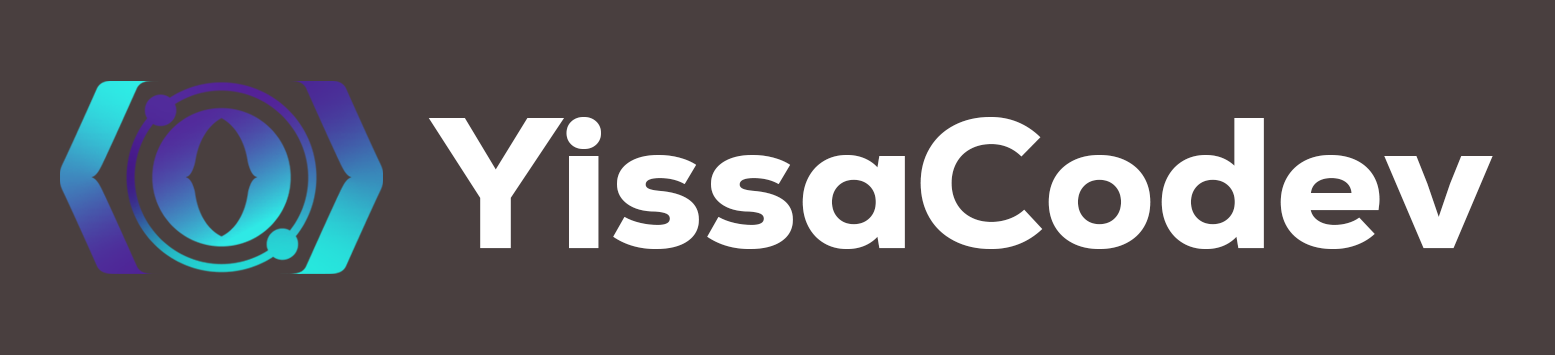
<style>
.page{position:relative;width:1555px;height:355px;background:#493f3f}
.page>*{position:absolute;margin:0}
.t1{font:186.8px "Nexa-Heavy";color:#ffffff}
</style>
<div class="page">
<p class="t1" style="left:428px;top:117px;width:1065px;height:132px">YissaCodev</p>
</div>
